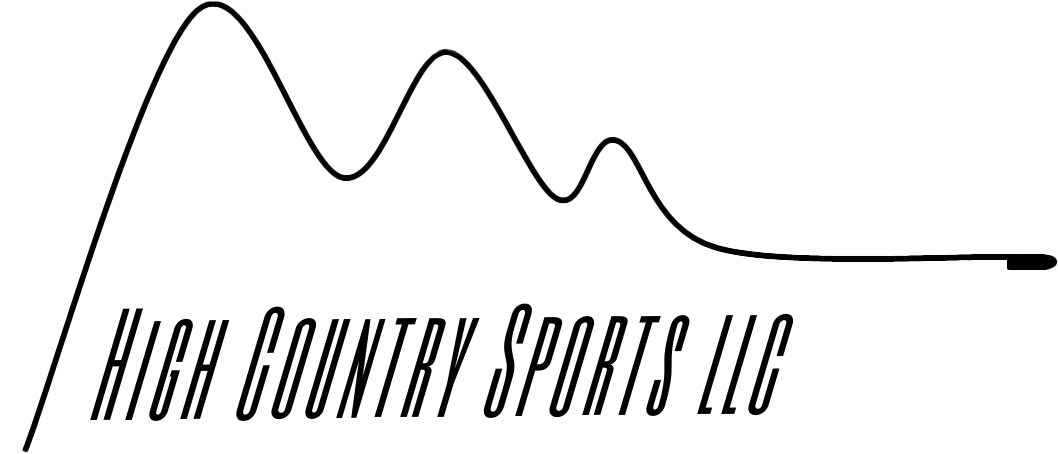
<style>
.page{position:relative;width:1058px;height:454px;background:#ffffff}
.page>*{position:absolute;margin:0}
.t1{font:137.5px "SixCaps";letter-spacing:0.075em;color:#000000;scale:0.77 1}
</style>
<div class="page">
<p class="t1" style="left:90px;top:303px;width:704px;height:118px;rotate:-1deg">High Country Sports llc</p>
</div>
